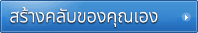
<style>
.page{position:relative;width:198px;height:33px}
.page>*{position:absolute;margin:0}
.t1{font:18px "NotoSansThai-Light";color:#ffffff}
</style>
<div class="page">
<p class="t1" style="left:10px;top:7px;width:148px;height:20px">สร้างคลับของคุณเอง</p>
</div>
